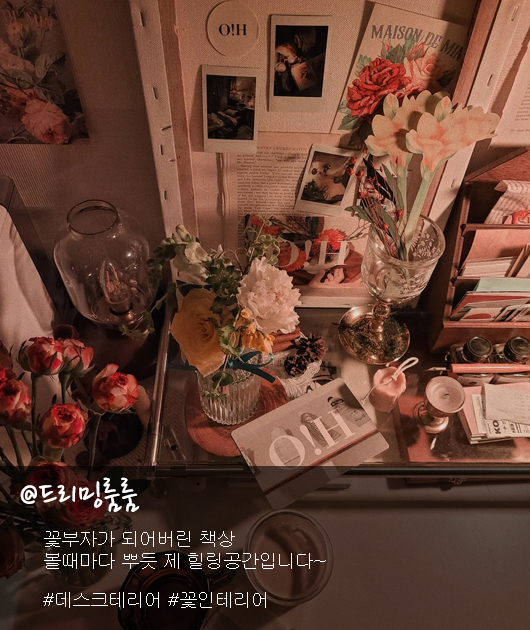
<style>
.page{position:relative;width:530px;height:630px}
.page>*{position:absolute;margin:0}
.t1{font:39.7px "NanumPen";color:#ffffff}
.t2{font:18px "Gulim";color:#ffffff}
</style>
<div class="page">
<p class="t1" style="left:20px;top:477px;width:120px;height:35px">@드리밍룸룸</p>
<p class="t2" style="left:44px;top:531px;width:282px;height:38px">꽃부자가 되어버린 책상<br>볼때마다 뿌듯 제 힐링공간입니다~</p>
<p class="t2" style="left:43px;top:592px;width:223px;height:16px">#데스크테리어 #꽃인테리어</p>
</div>
